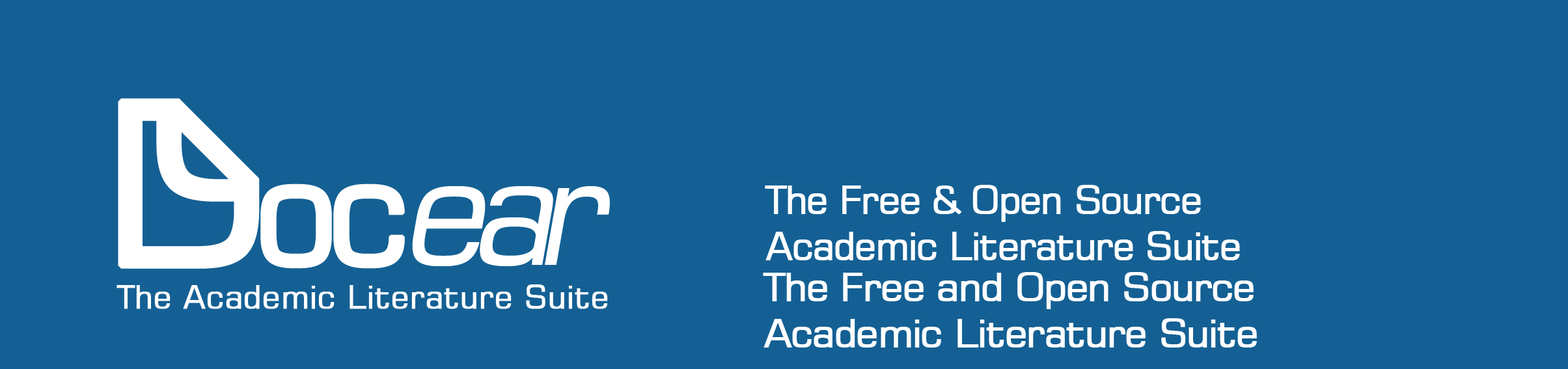
<style>
.page{position:relative;width:1568px;height:369px;background:#146094}
.page>*{position:absolute;margin:0}
.t1{font:225.2px "Square721BT-Roman";letter-spacing:-0.105em;color:#ffffff;font-weight:bold}
.t2{font:149.7px "Square721BT-Roman";letter-spacing:-0.105em;color:#ffffff;font-weight:bold}
.t3{font:149.7px "Square721BT-Roman";letter-spacing:-0.105em;color:#ffffff;font-style:italic}
.t4{font:149.7px "Square721BT-Roman";letter-spacing:-0.135em;color:#ffffff;font-style:italic}
.t5{font:38.4px "Square721BT-Roman";letter-spacing:-0.05em;color:#ffffff;font-weight:bold}
.t6{font:38.4px "Square721BT-Roman";letter-spacing:-0.05em;color:#ffffff;font-weight:bold;scale:1.04 1}
.t7{font:31.9px "Square721BT-Roman";letter-spacing:-0.01em;color:#ffffff;font-weight:bold}
</style>
<div class="page">
<p class="t1" style="left:118px;top:98px;width:142px;height:171px">D</p>
<p class="t2" style="left:260px;top:184px;width:350px;height:85px">oc<span class="t3">e</span><span class="t4">ar</span></p>
<p class="t5" style="left:765px;top:185px;width:475px;height:75px">The Free &amp; Open Source<br>Academic Literature Suite</p>
<p class="t6" style="left:763px;top:272px;width:494px;height:76px">The Free and Open Source<br>Academic Literature Suite</p>
<p class="t7" style="left:117px;top:284px;width:491px;height:25px">The Academic Literature Suite</p>
</div>
